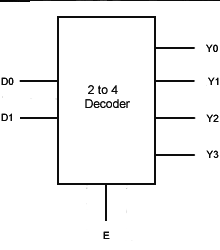
<style>
.page{position:relative;width:220px;height:250px;background:#ffffff}
.page>*{position:absolute;margin:0}
.t1{font:10px "ArialMT"}
.t2{font:10px "ArialMT";color:#0d0d0d}
.t3{font:12px "ArialMT"}
</style>
<div class="page">
<p class="t1" style="left:206px;top:43px;width:12px;height:8px">Y0</p>
<p class="t1" style="left:1px;top:76px;width:13px;height:8px">D0</p>
<p class="t2" style="left:208px;top:76px;width:11px;height:8px">Y1</p>
<p class="t3" style="left:85px;top:84px;width:45px;height:23px">2 to 4<br>Decoder</p>
<p class="t1" style="left:206px;top:113px;width:13px;height:8px">Y2</p>
<p class="t1" style="left:206px;top:149px;width:13px;height:8px">Y3</p>
</div>
